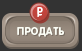
<style>
.page{position:relative;width:82px;height:51px;background:#333333}
.page>*{position:absolute;margin:0}
.t1{font:10px "RotondaC-Bold";letter-spacing:0.06em;color:#fbfdf5;text-transform:uppercase}
</style>
<div class="page">
<p class="t1" style="left:17px;top:27px;width:47px;height:10px">продать</p>
</div>
